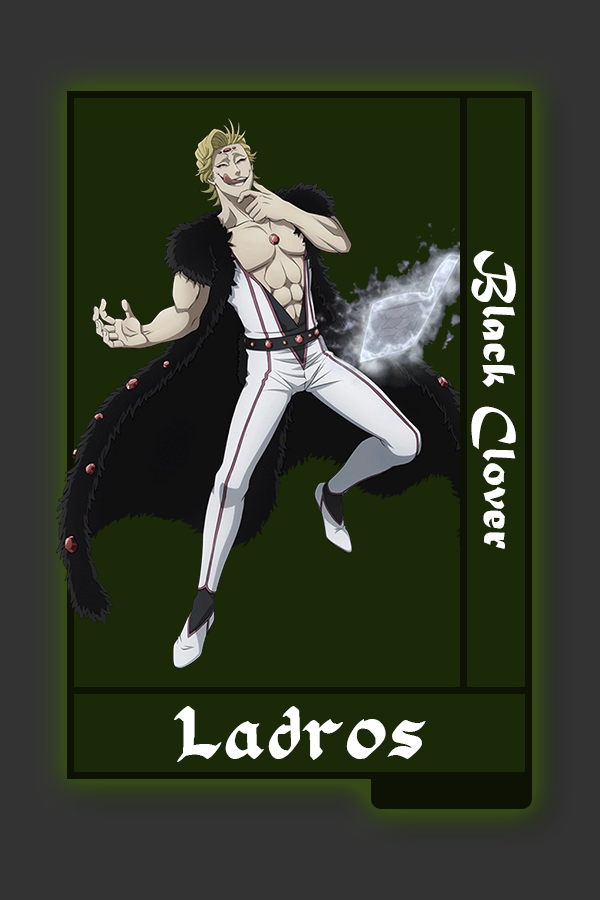
<style>
.page{position:relative;width:600px;height:900px;background:#1b2908}
.page>*{position:absolute;margin:0}
.t1{font:48.8px "MaturaMTScriptCapitals";color:#ffffff}
.t2{font:64.6px "FloranteatLaura";color:#ffffff}
</style>
<div class="page">
<p class="t1" style="left:471px;top:250px;width:45px;height:299px;rotate:90deg">Black Clover</p>
<p class="t2" style="left:174px;top:706px;width:252px;height:56px">Ladros</p>
</div>
